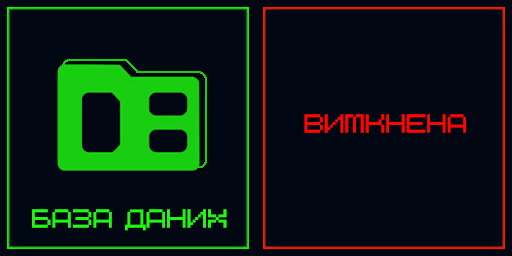
<style>
.page{position:relative;width:512px;height:256px;background:#000713}
.page>*{position:absolute;margin:0}
.t1{font:24.4px "Citadel-Regular";letter-spacing:-0.025em;color:#ff0400}
.t2{font:24.4px "Citadel-Regular";letter-spacing:-0.025em;color:#21f710}
</style>
<div class="page">
<p class="t1" style="left:304px;top:114px;width:162px;height:19px">вимкнена</p>
<p class="t2" style="left:32px;top:209px;width:195px;height:22px">база даних</p>
</div>
